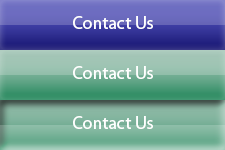
<style>
.page{position:relative;width:225px;height:150px}
.page>*{position:absolute;margin:0}
.t1{font:18px "MyriadPro-Regular";color:#ffffff}
</style>
<div class="page">
<p class="t1" style="left:73px;top:16px;width:80px;height:13px">Contact Us</p>
<p class="t1" style="left:73px;top:66px;width:80px;height:13px">Contact Us</p>
<p class="t1" style="left:73px;top:116px;width:80px;height:13px">Contact Us</p>
</div>
